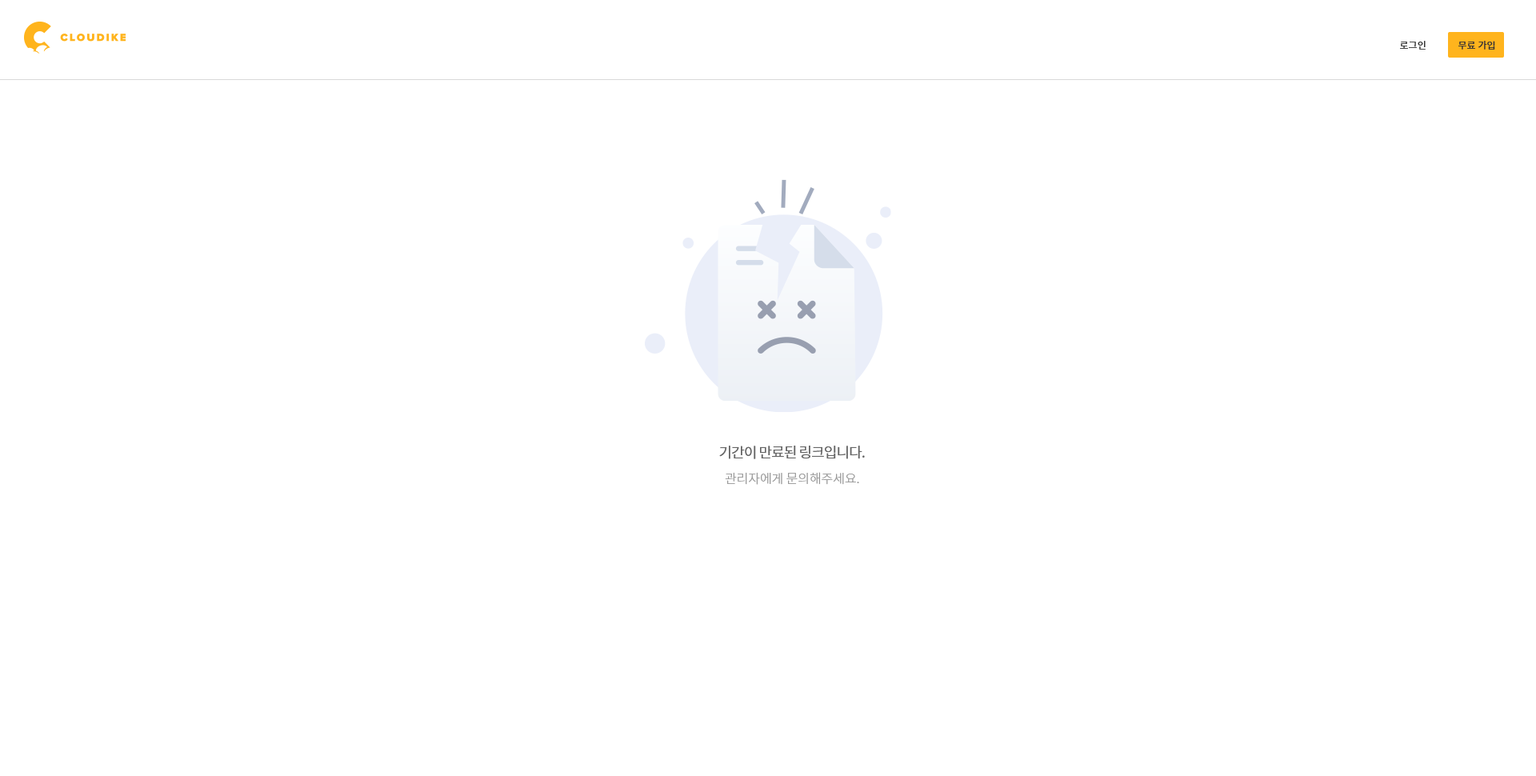
<style>
.page{position:relative;width:1536px;height:776px;background:#ffffff}
.page>*{position:absolute;margin:0}
.t1{font:9.6px "NotoSansCJKkr-Medium";color:#333333}
.t2{font:14.4px "NotoSansCJKkr-Regular";letter-spacing:-0.05em;color:#666666}
.t3{font:12.8px "NotoSansCJKkr-Light";letter-spacing:-0.005em;color:#999999}
</style>
<div class="page">
<p class="t1" style="left:1400px;top:41px;width:26px;height:9px">로그인</p>
<p class="t1" style="left:1459px;top:41px;width:37px;height:9px">무료 가입</p>
<p class="t2" style="left:719px;top:446px;width:146px;height:13px">기간이 만료된 링크입니다.</p>
<p class="t3" style="left:725px;top:472px;width:134px;height:13px">관리자에게 문의해주세요.</p>
</div>
